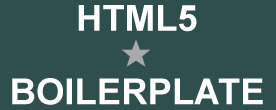
<style>
.page{position:relative;width:276px;height:110px;background:#2f4f4f}
.page>*{position:absolute;margin:0}
.t1{font:35.9px "Arial-BoldMT";color:#ffffff}
</style>
<div class="page">
<p class="t1" style="left:78px;top:5px;width:119px;height:27px">HTML5</p>
<p class="t1" style="left:12px;top:78px;width:251px;height:27px">BOILERPLATE</p>
</div>
